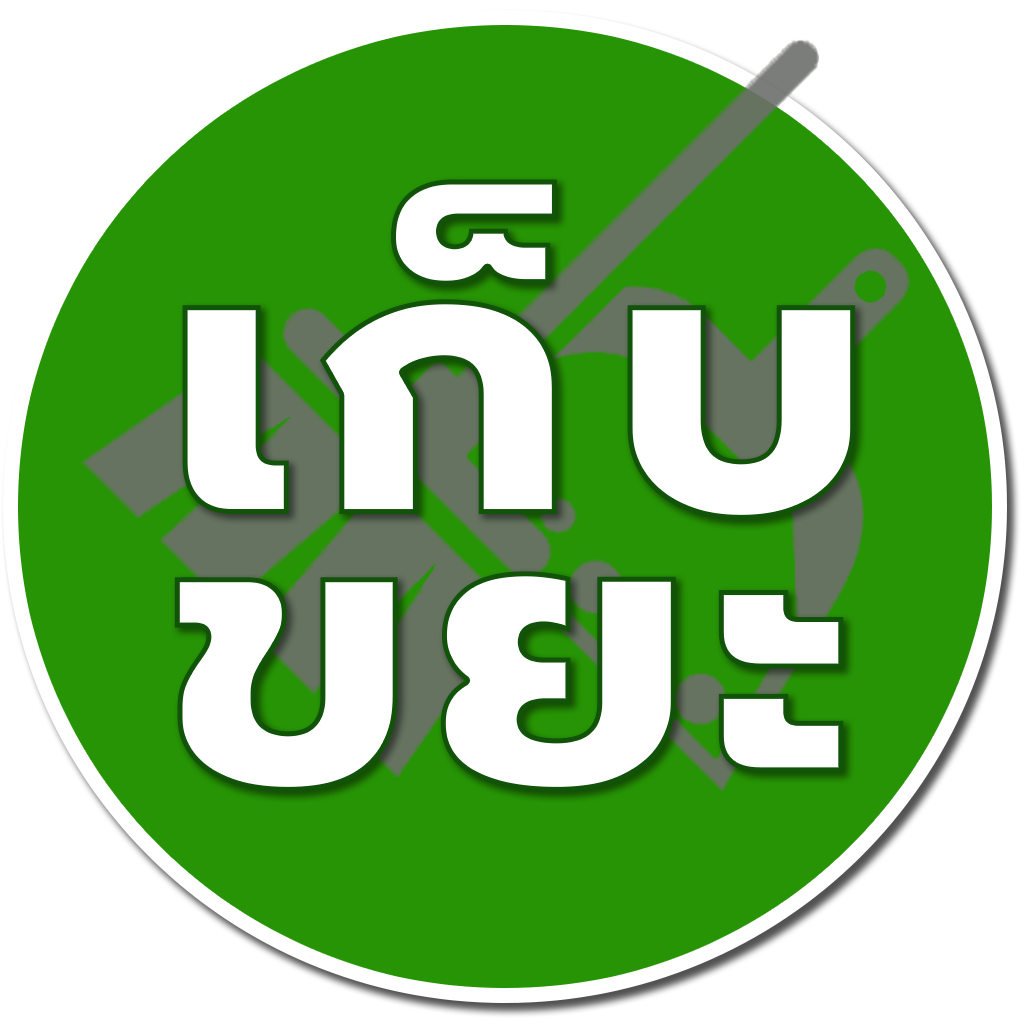
<style>
.page{position:relative;width:1024px;height:1024px;background:#ffffff}
.page>*{position:absolute;margin:0}
.t1{font:390.3px/272px "Prompt-ExtraBold";letter-spacing:0.05em;color:#ffffff}
</style>
<div class="page">
<p class="t1" style="left:174px;top:179px;width:682px;height:613px">เก็บ<br>ขยะ</p>
</div>
